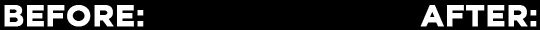
<style>
.page{position:relative;width:540px;height:30px;background:#000000}
.page>*{position:absolute;margin:0}
.t1{font:30px "GothamBold";color:#ffffff;font-weight:bold}
</style>
<div class="page">
<p class="t1" style="left:4px;top:5px;width:533px;height:22px">BEFORE:                            AFTER:</p>
</div>
